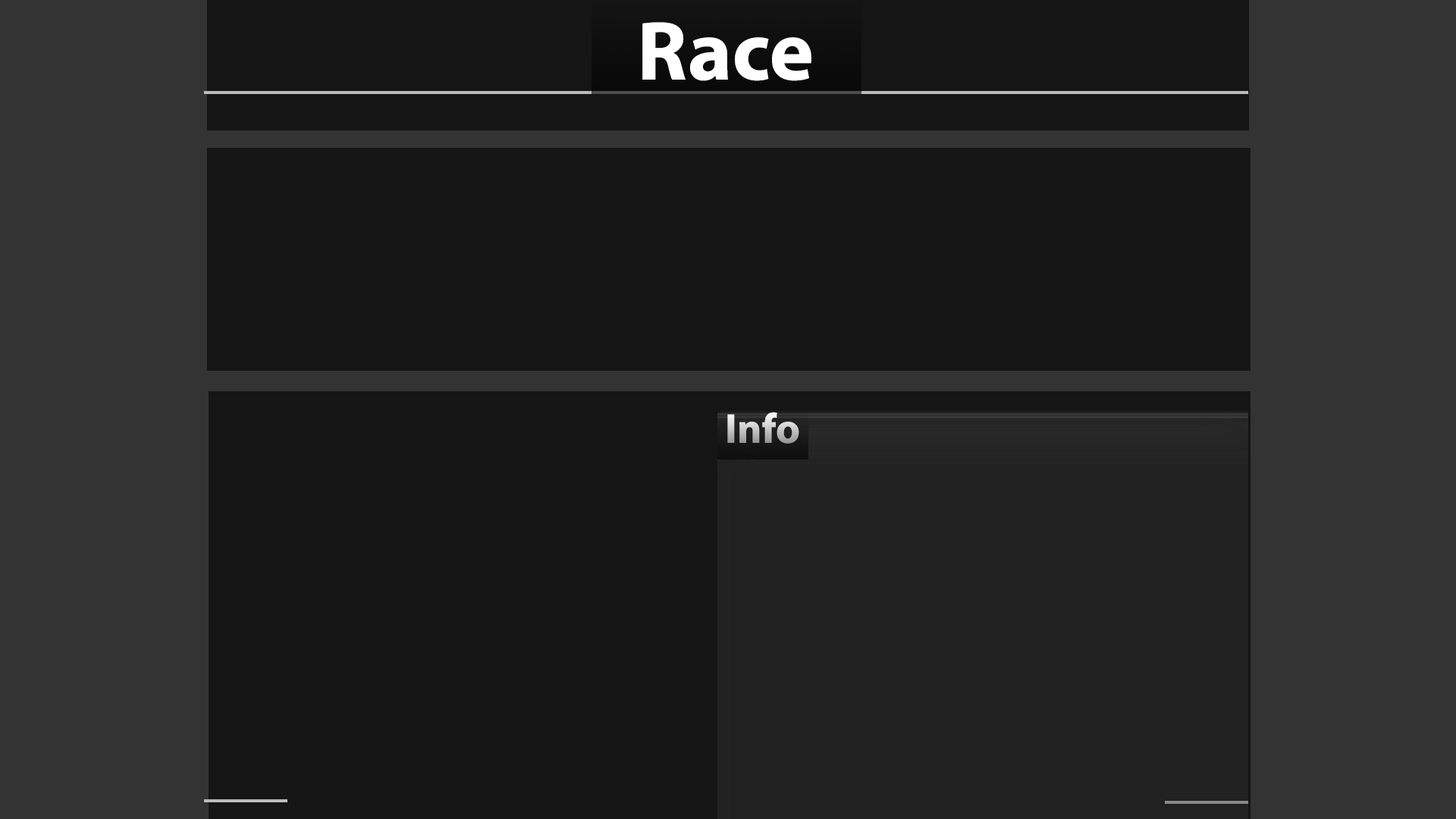
<style>
.page{position:relative;width:1456px;height:819px;background:#151515}
.page>*{position:absolute;margin:0}
.t1{font:84.3px "MyriadPro-Bold";color:#ffffff}
.t2{font:42.1px "MyriadPro-Bold"}
</style>
<div class="page">
<p class="t1" style="left:642px;top:22px;width:169px;height:59px">Race</p>
<p class="t2" style="left:727px;top:412px;width:72px;height:32px">Info</p>
</div>
